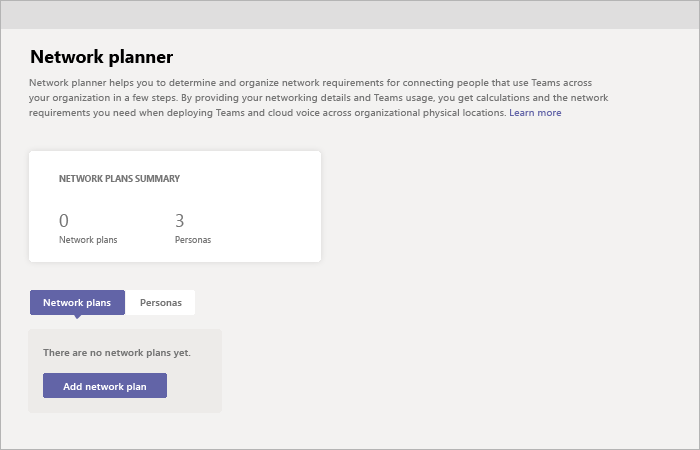
<style>
.page{position:relative;width:700px;height:450px;background:#f3f2f1}
.page>*{position:absolute;margin:0}
.t1{font:18px "SegoeUI-Bold";color:#000000}
.t2{font:10.4px/15px "SegoeUI";color:#757575}
.t3{font:10.4px/15px "SegoeUI";color:#6365a8}
.t4{font:8.6px "SegoeUI-Bold";color:#757575}
.t5{font:18px "SegoeUI";color:#757575}
.t6{font:9px "SegoeUI";color:#757575}
.t7{font:10.2px "SegoeUI-Semibold";color:#ffffff}
.t8{font:10.2px "SegoeUI-Semibold";color:#757575}
</style>
<div class="page">
<p class="t1" style="left:31px;top:49px;width:142px;height:18px">Network planner</p>
<p class="t2" style="left:29px;top:79px;width:580px;height:39px">Network planner helps you to determine and organize network requirements for connecting people that use Teams across<br>your organization in a few steps. By providing your networking details and Teams usage, you get calculations and the network<br>requirements you need when deploying Teams and cloud voice across organizational physical locations. <span class="t3">Learn more</span></p>
<p class="t4" style="left:59px;top:175px;width:121px;height:7px">NETWORK PLANS SUMMARY</p>
<p class="t5" style="left:59px;top:214px;width:10px;height:13px">0</p>
<p class="t5" style="left:176px;top:214px;width:8px;height:13px">3</p>
<p class="t6" style="left:59px;top:236px;width:58px;height:9px">Network plans</p>
<p class="t6" style="left:175px;top:236px;width:36px;height:7px">Personas</p>
<p class="t7" style="left:43px;top:299px;width:68px;height:9px">Network plans</p>
<p class="t8" style="left:140px;top:299px;width:42px;height:7px">Personas</p>
<p class="t8" style="left:43px;top:349px;width:148px;height:9px">There are no network plans yet.</p>
<p class="t7" style="left:63px;top:383px;width:83px;height:9px">Add network plan</p>
</div>
